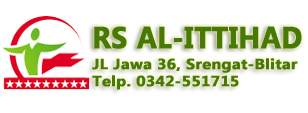
<style>
.page{position:relative;width:308px;height:113px;background:#ffffff}
.page>*{position:absolute;margin:0}
.t1{font:30.2px "Ebrima-Bold";color:#467a05;font-weight:bold;scale:0.93 1}
.t2{font:14.4px "Ebrima-Bold";color:#467a05;font-weight:bold;scale:1.12 1}
</style>
<div class="page">
<p class="t1" style="left:94px;top:26px;width:208px;height:23px">RS AL-ITTIHAD</p>
<p class="t2" style="left:92px;top:58px;width:206px;height:32px">JL Jawa 36, Srengat-Blitar<br>Telp. 0342-551715</p>
</div>
